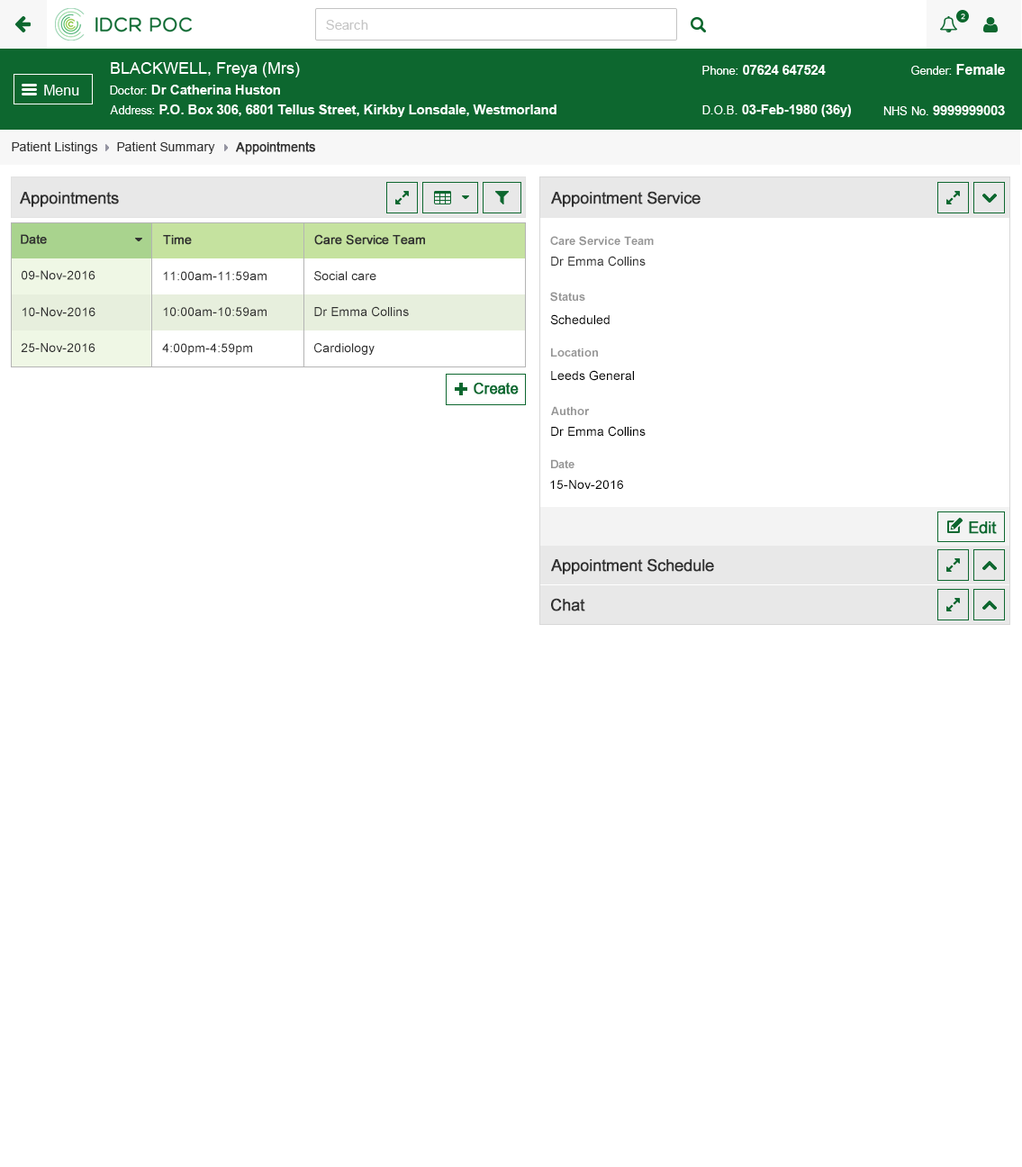
<style>
.page{position:relative;width:1022px;height:1167px;background:#ffffff}
.page>*{position:absolute;margin:0}
.t1{font:12.6px "ArialMT";color:#313131}
.t2{font:12.6px "ArialMT";color:#313131;font-weight:bold}
.t3{font:16.2px "ArialMT";color:#303030;font-weight:bold}
.t4{font:12.6px "ArialMT";color:#303030;font-weight:bold}
.t5{font:11.7px "Arial-BoldMT";color:#959595}
.t6{font:12.6px "ArialMT";color:#303030}
.t7{font:12.6px "ArialMT";color:#000000}
</style>
<div class="page">
<p class="t1" style="left:12px;top:141px;width:86px;height:13px">Patient Listings</p>
<p class="t1" style="left:117px;top:141px;width:98px;height:13px">Patient Summary</p>
<p class="t2" style="left:236px;top:141px;width:79px;height:14px">Appointments</p>
<p class="t3" style="left:20px;top:192px;width:99px;height:15px">Appointments</p>
<p class="t3" style="left:551px;top:191px;width:149px;height:16px">Appointment Service</p>
<p class="t4" style="left:21px;top:234px;width:26px;height:10px">Date</p>
<p class="t4" style="left:163px;top:235px;width:29px;height:10px">Time</p>
<p class="t4" style="left:314px;top:234px;width:111px;height:11px">Care Service Team</p>
<p class="t5" style="left:550px;top:236px;width:104px;height:10px">Care Service Team</p>
<p class="t6" style="left:551px;top:256px;width:95px;height:11px">Dr Emma Collins</p>
<p class="t6" style="left:22px;top:270px;width:73px;height:10px">09-Nov-2016</p>
<p class="t6" style="left:163px;top:271px;width:104px;height:10px">11:00am-11:59am</p>
<p class="t6" style="left:314px;top:271px;width:62px;height:10px">Social care</p>
<p class="t5" style="left:550px;top:292px;width:35px;height:10px">Status</p>
<p class="t6" style="left:23px;top:307px;width:72px;height:10px">10-Nov-2016</p>
<p class="t6" style="left:163px;top:307px;width:104px;height:9px">10:00am-10:59am</p>
<p class="t6" style="left:314px;top:306px;width:95px;height:11px">Dr Emma Collins</p>
<p class="t7" style="left:550px;top:314px;width:60px;height:11px">Scheduled</p>
<p class="t6" style="left:21px;top:343px;width:74px;height:9px">25-Nov-2016</p>
<p class="t6" style="left:162px;top:343px;width:90px;height:12px">4:00pm-4:59pm</p>
<p class="t6" style="left:314px;top:343px;width:61px;height:12px">Cardiology</p>
<p class="t5" style="left:551px;top:348px;width:47px;height:9px">Location</p>
<p class="t7" style="left:551px;top:370px;width:83px;height:11px">Leeds General</p>
<p class="t5" style="left:551px;top:406px;width:39px;height:9px">Author</p>
<p class="t7" style="left:551px;top:426px;width:95px;height:11px">Dr Emma Collins</p>
<p class="t5" style="left:551px;top:459px;width:23px;height:9px">Date</p>
<p class="t7" style="left:550px;top:480px;width:73px;height:9px">15-Nov-2016</p>
<p class="t3" style="left:551px;top:558px;width:163px;height:16px">Appointment Schedule</p>
<p class="t3" style="left:551px;top:598px;width:34px;height:13px">Chat</p>
</div>
